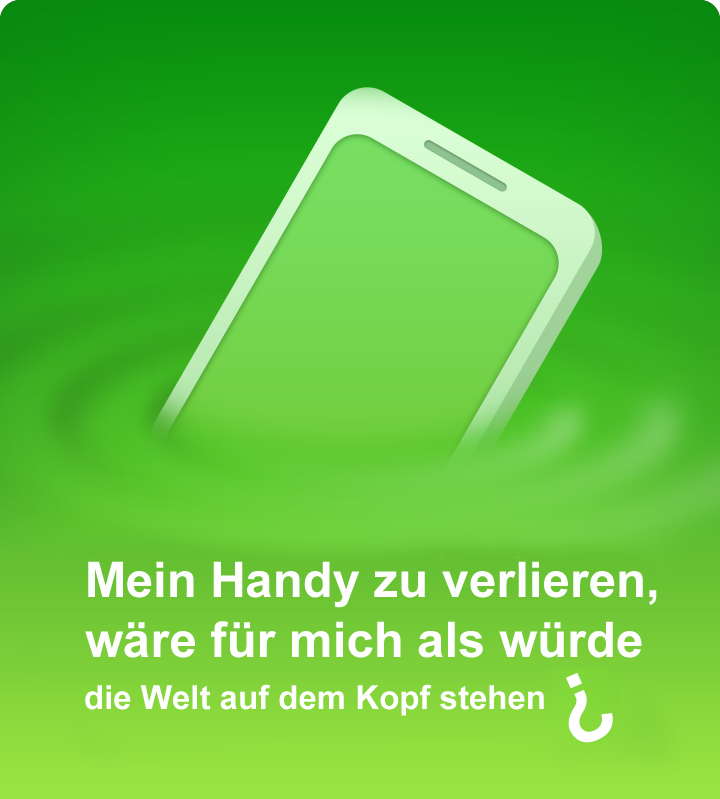
<style>
.page{position:relative;width:720px;height:799px}
.page>*{position:absolute;margin:0}
.t1{font:49px/60px "Arial-BoldMT";color:#fefefe}
.t2{font:33px "Arial-BoldMT";color:#fefefe}
</style>
<div class="page">
<p class="t1" style="left:85px;top:561px;width:572px;height:97px">Mein Handy zu verlieren,<br>wäre für mich als würde</p>
<p class="t2" style="left:85px;top:684px;width:459px;height:32px">die Welt auf dem Kopf stehen</p>
</div>
